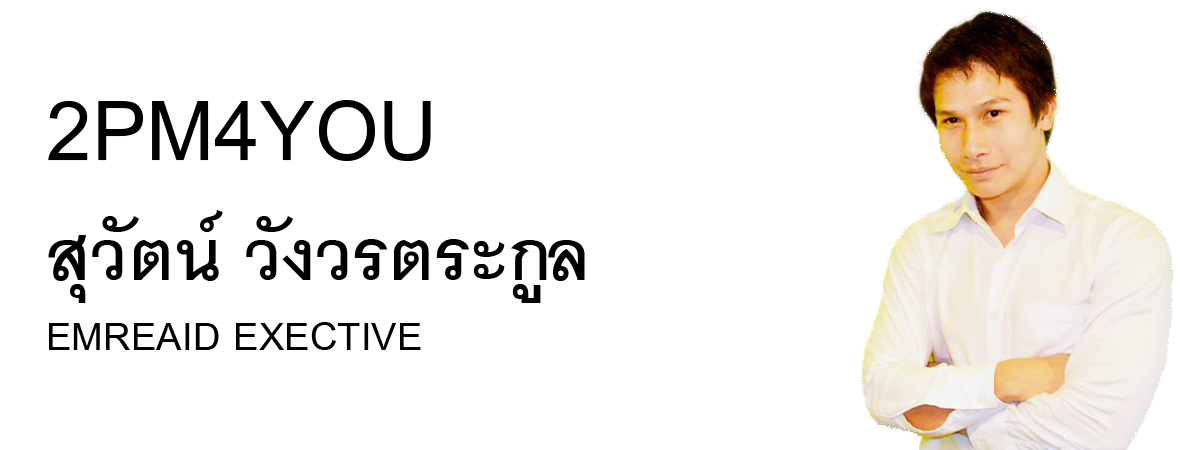
<style>
.page{position:relative;width:1200px;height:450px;background:#ffffff}
.page>*{position:absolute;margin:0}
.t1{font:100px "CordiaUPC-Bold";color:#000000}
.t2{font:125px "CordiaUPC-Bold";color:#000000}
.t3{font:58.3px "CordiaUPC-Bold";color:#000000}
</style>
<div class="page">
<p class="t1" style="left:48px;top:100px;width:537px;height:250px"><span class="t2">2PM4YOU<br></span>สุวัตน์ วังวรตระกูล<br><span class="t3">EMREAID EXECTIVE</span></p>
</div>
